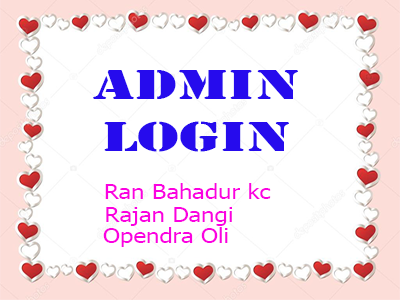
<style>
.page{position:relative;width:400px;height:300px;background:#ffffff}
.page>*{position:absolute;margin:0}
.t1{font:43.1px "Stencil";color:#260bed;scale:1.53 1}
.t2{font:43.1px "Tahoma";color:#8dcbc3;scale:1.53 1}
.t3{font:20px "Tahoma";color:#fb01e1;scale:1.2 1}
</style>
<div class="page">
<p class="t1" style="left:93px;top:70px;width:205px;height:82px;text-align:center"><span class="t2">   </span>Admin<br>   Login</p>
<p class="t3" style="left:105px;top:183px;width:166px;height:16px">Ran Bahadur kc</p>
<p class="t3" style="left:106px;top:207px;width:126px;height:19px">Rajan Dangi</p>
<p class="t3" style="left:103px;top:227px;width:125px;height:20px">Opendra Oli</p>
</div>
